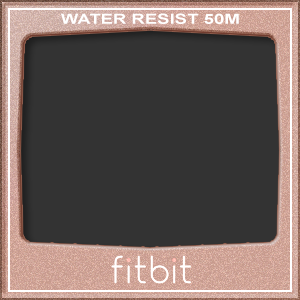
<style>
.page{position:relative;width:300px;height:300px;background:#333333}
.page>*{position:absolute;margin:0}
.t1{font:14px "Arial-BoldMT";color:#ffffff;scale:1.32 1}
</style>
<div class="page">
<p class="t1" style="left:61px;top:13px;width:178px;height:11px">WATER RESIST 50M</p>
</div>
